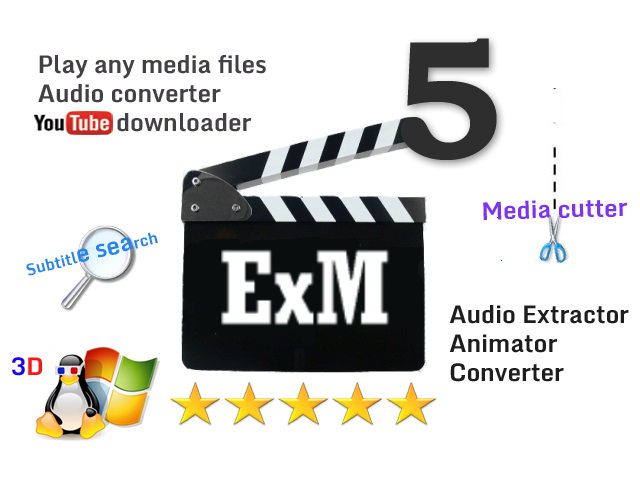
<style>
.page{position:relative;width:640px;height:480px;background:#ffffff}
.page>*{position:absolute;margin:0}
.t1{font:169.9px "BookmanOldStyle-Bold";color:#2e2e2e}
.t2{font:24px "Monda-Bold";color:#424044}
.t3{font:24px "Monda-Bold";color:#7c32f7}
.t4{font:16px "Monda-Bold";color:#2684ed}
.t5{font:24px "Monda-Bold";color:#2684ed}
.t6{font:24px "Monda-Bold";color:#1d1d1d}
.t7{font:24px "Monda-Bold";color:#1800ff}
.t8{font:24px "Monda-Bold";color:#fb1515}
</style>
<div class="page">
<p class="t1" style="left:401px;top:38px;width:96px;height:122px">5</p>
<p class="t2" style="left:38px;top:55px;width:228px;height:77px">Play any media files<br>Audio converter<br>             downloader</p>
<p class="t3" style="left:483px;top:200px;width:144px;height:20px;rotate:-1deg">Media cutter</p>
<p class="t4" style="left:26px;top:232px;width:132px;height:44px;rotate:-14deg">Subtitl<span class="t5">e sea</span>rch</p>
<p class="t6" style="left:449px;top:305px;width:180px;height:77px">Audio Extractor<br>Animator <br>Converter</p>
<p class="t7" style="left:12px;top:357px;width:13px;height:19px">3</p>
<p class="t8" style="left:28px;top:357px;width:14px;height:18px">D</p>
</div>
